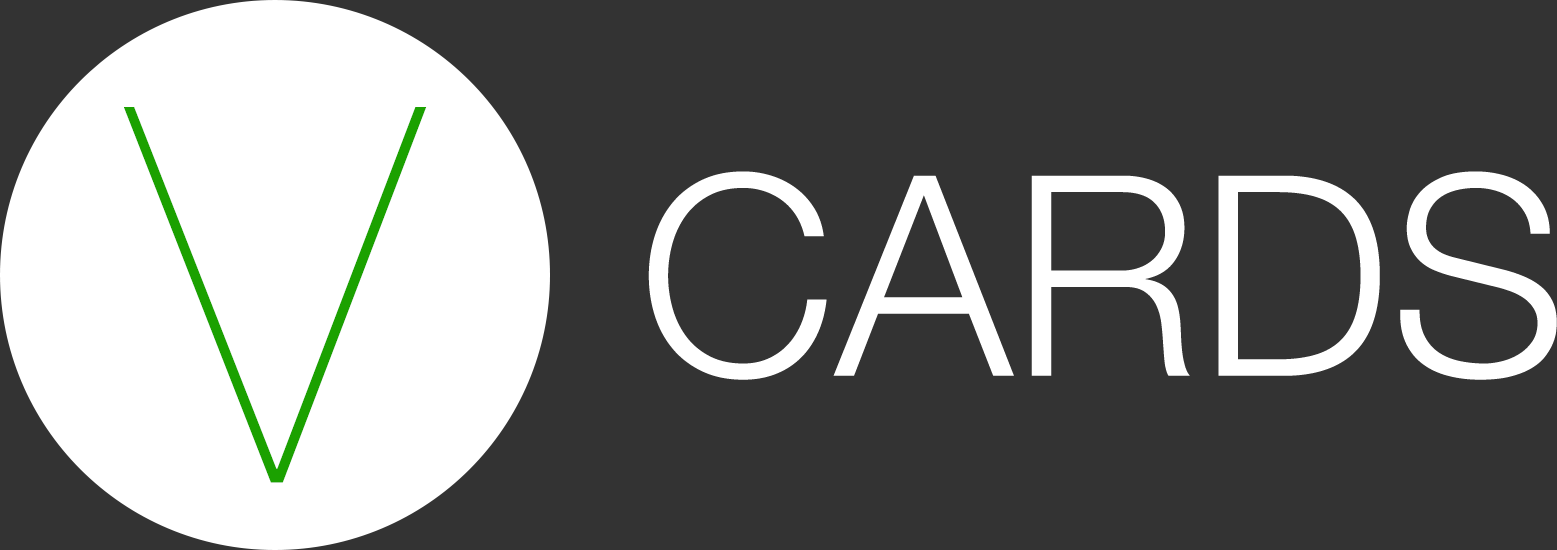
<style>
.page{position:relative;width:1557px;height:550px;background:#333333}
.page>*{position:absolute;margin:0}
.t1{font:525.7px "HelveticaNeue-UltraLight";color:#1ba100}
.t2{font:280px "HelveticaNeue-Light";color:#ffffff}
</style>
<div class="page">
<p class="t1" style="left:124px;top:107px;width:303px;height:376px">V</p>
<p class="t2" style="left:648px;top:171px;width:909px;height:209px">CARDS</p>
</div>
